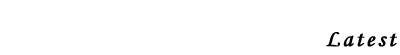
<style>
.page{position:relative;width:400px;height:55px;background:#ffffff}
.page>*{position:absolute;margin:0}
.t1{font:24px "MonotypeCorsiva";letter-spacing:0.1em;color:#000000;font-weight:bold}
</style>
<div class="page">
<p class="t1" style="left:326px;top:32px;width:71px;height:15px">Latest</p>
</div>
